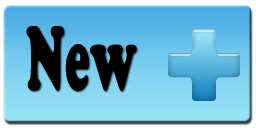
<style>
.page{position:relative;width:256px;height:128px}
.page>*{position:absolute;margin:0}
.t1{font:93.7px "CooperBlack";letter-spacing:0.025em;color:#000000;scale:0.5 1}
</style>
<div class="page">
<p class="t1" style="left:26px;top:26px;width:111px;height:66px">New</p>
</div>
